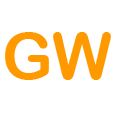
<style>
.page{position:relative;width:114px;height:114px;background:#ffffff}
.page>*{position:absolute;margin:0}
.t1{font:63.9px "ArialRoundedMTBold";color:#ff9900}
</style>
<div class="page">
<p class="t1" style="left:5px;top:32px;width:106px;height:48px">GW</p>
</div>
